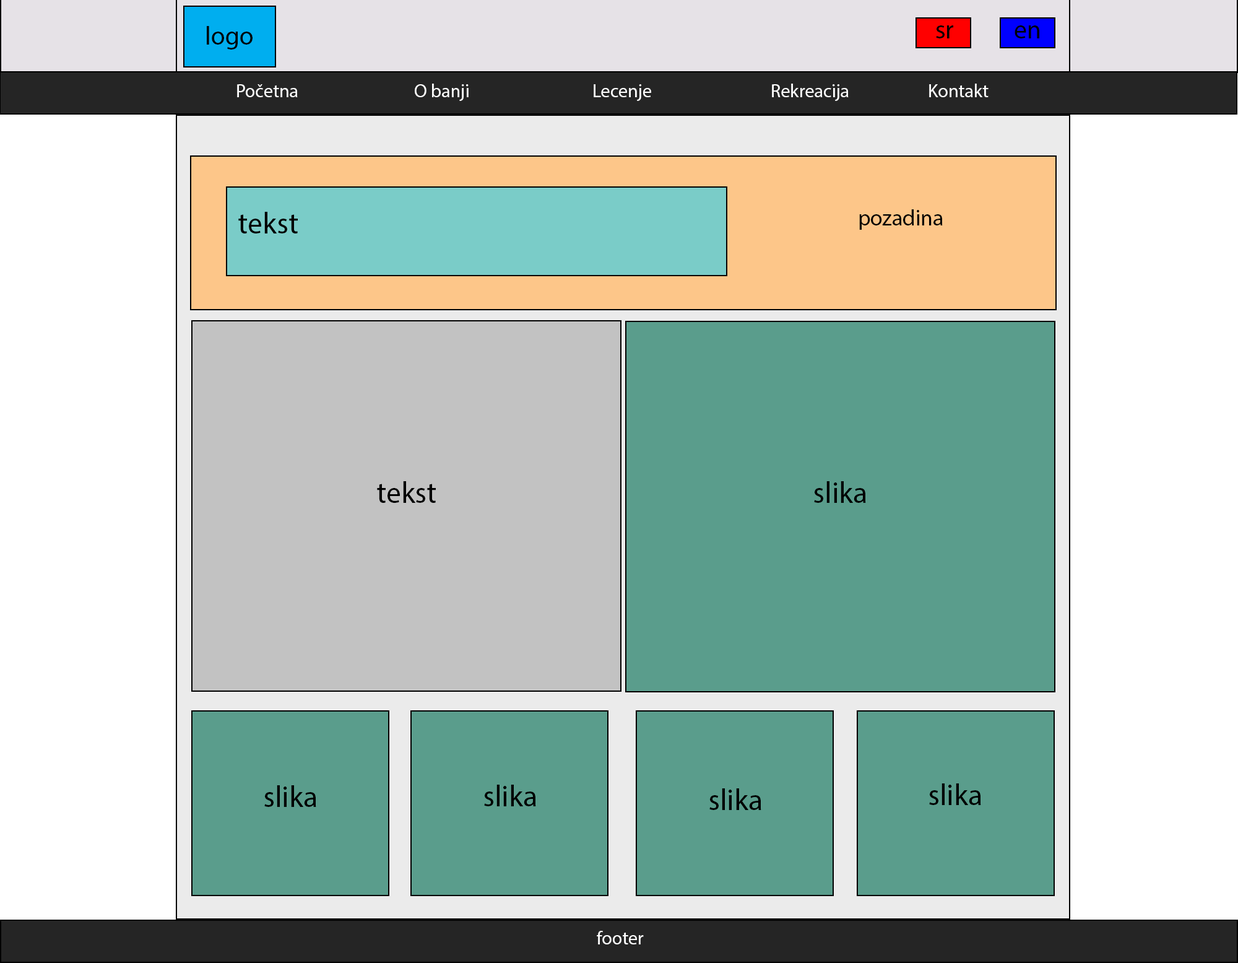
<style>
.page{position:relative;width:1238px;height:963px;background:#ffffff}
.page>*{position:absolute;margin:0}
.t1{font:25.8px "MyriadPro-Regular";color:#000101}
.t2{font:18.6px "MyriadPro-Regular";color:#ffffff}
.t3{font:18.6px "MyriadPro-Regular";color:#000101}
.t4{font:22.3px "MyriadPro-Regular";color:#000000}
.t5{font:29.7px "MyriadPro-Regular";color:#000000}
</style>
<div class="page">
<p class="t1" style="left:207px;top:26px;width:46px;height:24px">logo</p>
<p class="t1" style="left:936px;top:25px;width:18px;height:13px">sr</p>
<p class="t1" style="left:1015px;top:25px;width:25px;height:13px">en</p>
<p class="t2" style="left:237px;top:84px;width:752px;height:17px"><span class="t3">  </span>Početna      O banji      Lecenje      Rekreacija Kontakt</p>
<p class="t4" style="left:859px;top:209px;width:84px;height:21px">pozadina</p>
<p class="t5" style="left:238px;top:212px;width:60px;height:21px">tekst</p>
<p class="t5" style="left:377px;top:481px;width:59px;height:22px">tekst</p>
<p class="t5" style="left:814px;top:481px;width:52px;height:22px">slika</p>
<p class="t5" style="left:264px;top:785px;width:52px;height:22px">slika</p>
<p class="t5" style="left:484px;top:785px;width:52px;height:21px">slika</p>
<p class="t5" style="left:929px;top:783px;width:52px;height:22px">slika</p>
<p class="t5" style="left:710px;top:788px;width:52px;height:22px">slika</p>
<p class="t2" style="left:597px;top:931px;width:47px;height:13px">footer</p>
</div>
